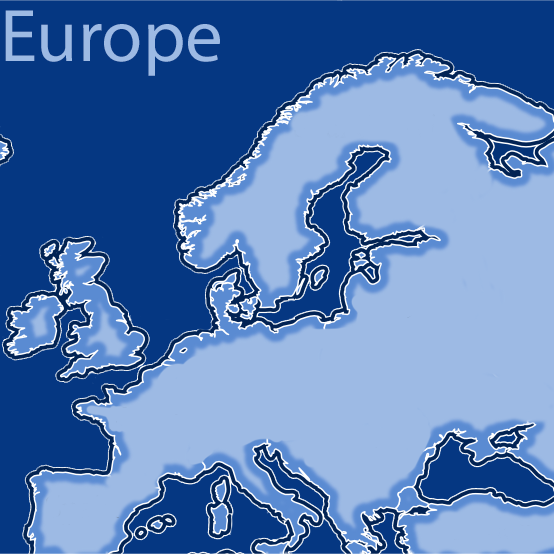
<style>
.page{position:relative;width:554px;height:554px;background:#053782}
.page>*{position:absolute;margin:0}
.t1{font:75px "MyriadPro-Regular";color:#9dbae4}
</style>
<div class="page">
<p class="t1" style="left:5px;top:10px;width:215px;height:66px">Europe</p>
</div>
